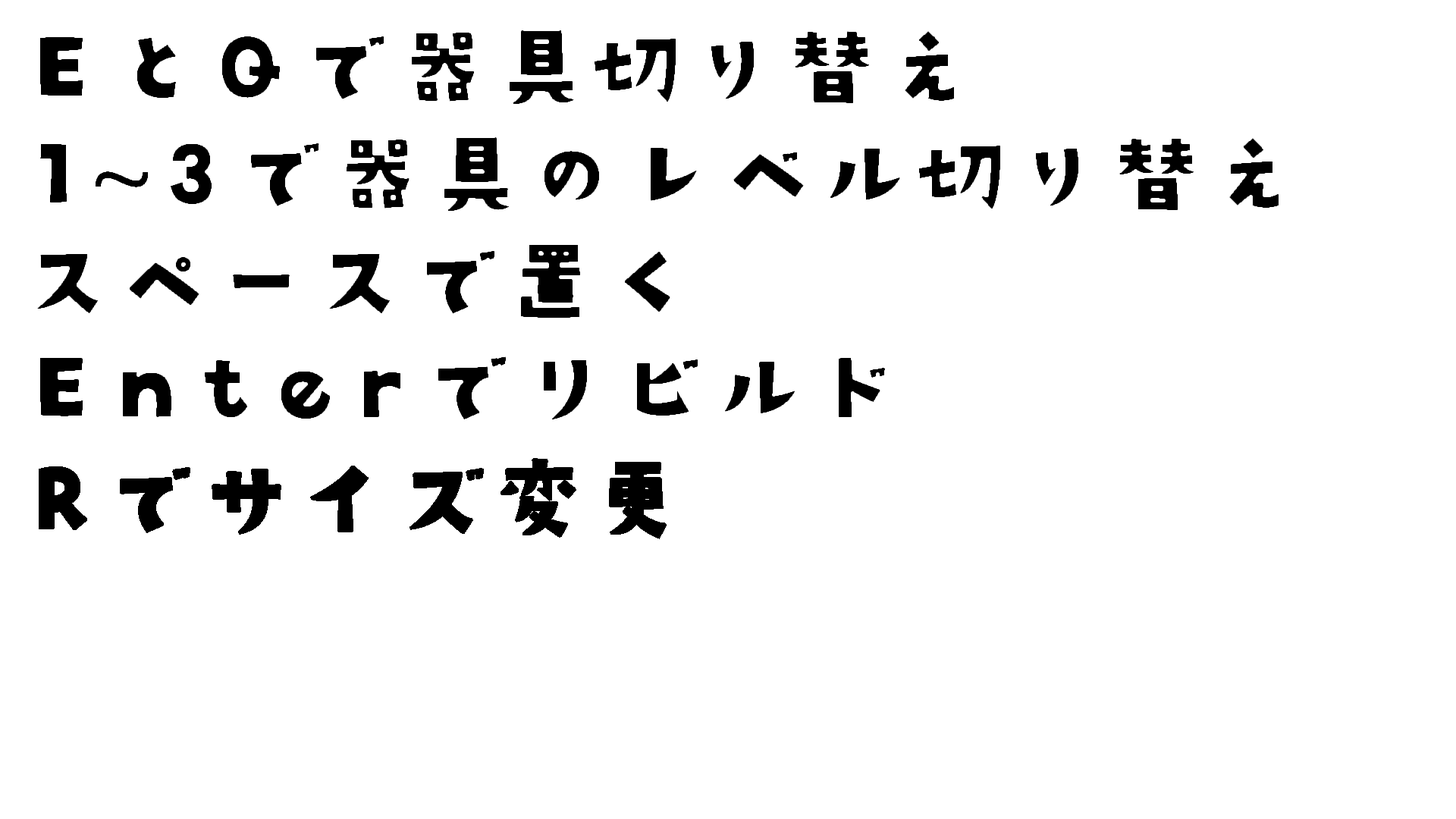
<style>
.page{position:relative;width:1456px;height:819px;background:#ffffff}
.page>*{position:absolute;margin:0}
.t1{font:94.8px "AB-kirigirisu";color:#000000;font-weight:bold}
.t2{font:94.8px "KozGoPr6N-Regular";color:#000000;font-weight:bold}
</style>
<div class="page">
<p class="t1" style="left:39px;top:29px;width:916px;height:76px">EとQで器具切り替え</p>
<p class="t1" style="left:39px;top:136px;width:1241px;height:76px">1<span class="t2">∼</span>3で器具のレベル切り替え</p>
<p class="t1" style="left:36px;top:243px;width:636px;height:76px">スペースで置く</p>
<p class="t1" style="left:39px;top:355px;width:847px;height:66px">Enterでリビルド</p>
<p class="t1" style="left:39px;top:458px;width:628px;height:81px">Rでサイズ変更</p>
</div>
